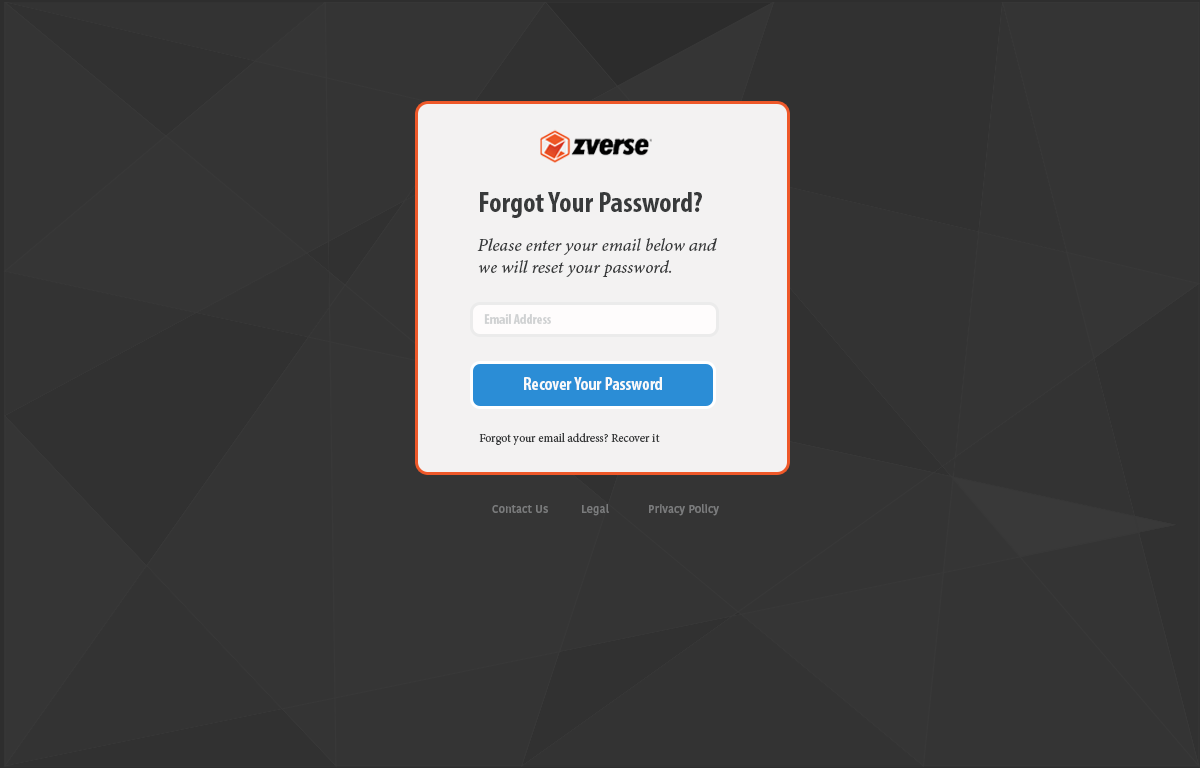
<style>
.page{position:relative;width:1200px;height:768px;background:#343434}
.page>*{position:absolute;margin:0}
.t1{font:29px "MyriadPro-BoldCond";color:#383a3b}
.t2{font:18px "MinionPro-It";color:#383a3b}
.t3{font:14px "MyriadPro-BoldCond";color:#cfd1d2}
.t4{font:18px "MyriadPro-BoldCond";color:#f9fafa}
.t5{font:12px "MinionPro-Regular";color:#383a3b}
.t6{font:11.2px "KohinoorDevanagari-Medium";color:#7a7b7c}
</style>
<div class="page">
<p class="t1" style="left:480px;top:192px;width:222px;height:26px">Forgot Your Password?</p>
<p class="t2" style="left:477px;top:238px;width:240px;height:39px">Please enter your email below and we will reset your password.</p>
<p class="t3" style="left:484px;top:314px;width:67px;height:10px">Email Address</p>
<p class="t4" style="left:524px;top:377px;width:138px;height:13px">Recover Your Password</p>
<p class="t5" style="left:479px;top:433px;width:181px;height:12px">Forgot your email address? Recover it</p>
<p class="t6" style="left:492px;top:504px;width:227px;height:12px">Contact Us  Legal   Privacy Policy</p>
</div>
